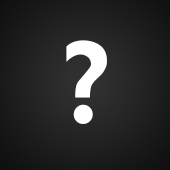
<style>
.page{position:relative;width:170px;height:170px}
.page>*{position:absolute;margin:0}
.t1{font:123.5px "Radiance-Bold";color:#ffffff;scale:0.96 1}
</style>
<div class="page">
<p class="t1" style="left:66px;top:40px;width:41px;height:84px">?</p>
</div>
